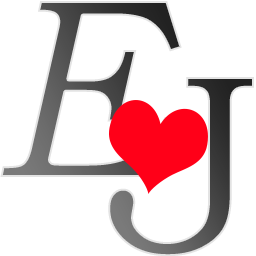
<style>
.page{position:relative;width:256px;height:256px;background:#ffffff}
.page>*{position:absolute;margin:0}
.t1{font:258.3px "BookmanOldStyle-Italic";letter-spacing:-0.01em}
.t2{font:258.3px "BookmanOldStyle";letter-spacing:-0.01em}
</style>
<div class="page">
<p class="t1" style="left:0px;top:1px;width:182px;height:176px">E</p>
<p class="t2" style="left:108px;top:77px;width:146px;height:180px">J</p>
</div>
